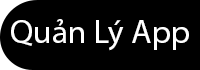
<style>
.page{position:relative;width:200px;height:70px;background:#000000}
.page>*{position:absolute;margin:0}
.t1{font:32.9px "MyriadPro-Regular";color:#fefefe}
</style>
<div class="page">
<p class="t1" style="left:11px;top:19px;width:178px;height:32px">Quản Lý App</p>
</div>
